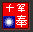
<style>
.page{position:relative;width:33px;height:32px;background:#f20000}
.page>*{position:absolute;margin:0}
.t1{font:10.4px "SimSun";color:#ffffff}
.t2{font:11.7px "SimSun";color:#ffffff}
</style>
<div class="page">
<p class="t1" style="left:6px;top:4px;width:19px;height:8px">十军</p>
<p class="t2" style="left:16px;top:15px;width:11px;height:12px">奉</p>
</div>
